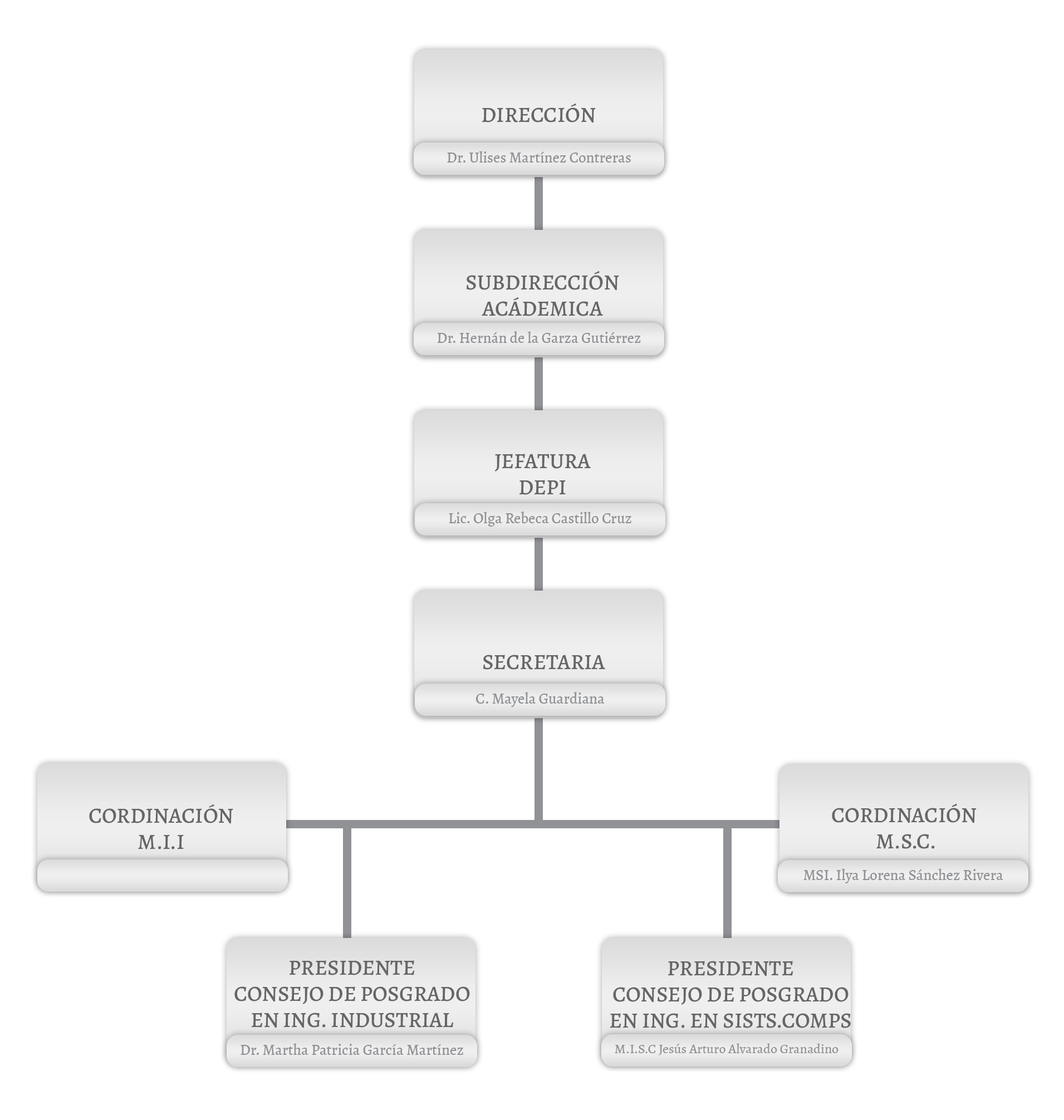
<style>
.page{position:relative;width:1064px;height:1120px;background:#ffffff}
.page>*{position:absolute;margin:0}
.t1{font:15.1px "Alegreya-Medium";color:#909295}
.t2{font:21.8px "Alegreya-Medium";color:#666666}
.t3{font:13.4px "Alegreya-Medium";color:#909295}
</style>
<div class="page">
<p class="t1" style="left:447px;top:151px;width:184px;height:12px">Dr. Ulises Martínez Contreras</p>
<p class="t1" style="left:437px;top:331px;width:204px;height:13px">Dr. Hernán de la Garza Gutiérrez</p>
<p class="t1" style="left:449px;top:512px;width:183px;height:15px">Lic. Olga Rebeca Castillo Cruz</p>
<p class="t1" style="left:476px;top:692px;width:129px;height:15px">C. Mayela Guardiana</p>
<p class="t2" style="left:89px;top:804px;width:144px;height:46px;text-align:center">CORDINACIÓN<br>M.I.I</p>
<p class="t2" style="left:832px;top:804px;width:145px;height:45px;text-align:center">CORDINACIÓN <br>M.S.C.</p>
<p class="t1" style="left:804px;top:869px;width:200px;height:15px">MSI. Ilya Lorena Sánchez Rivera</p>
<p class="t2" style="left:234px;top:961px;width:236px;height:68px;text-align:center">PRESIDENTE<br>CONSEJO DE POSGRADO<br>EN ING. INDUSTRIAL</p>
<p class="t2" style="left:610px;top:961px;width:241px;height:68px;text-align:center">PRESIDENTE<br>CONSEJO DE POSGRADO<br>EN ING. EN SISTS.COMPS</p>
<p class="t1" style="left:241px;top:1044px;width:222px;height:12px">Dr. Martha Patricia García Martínez</p>
<p class="t3" style="left:615px;top:1044px;width:224px;height:12px">M.I.S.C Jesús Arturo Alvarado Granadino</p>
</div>
